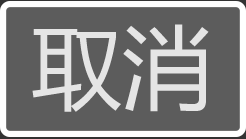
<style>
.page{position:relative;width:246px;height:139px;background:#5c5c5c}
.page>*{position:absolute;margin:0}
.t1{font:90.6px "MicrosoftYaHei";color:#e5e5e5}
</style>
<div class="page">
<p class="t1" style="left:32px;top:24px;width:177px;height:88px">取消</p>
</div>
